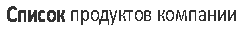
<style>
.page{position:relative;width:240px;height:30px;background:#ffffff}
.page>*{position:absolute;margin:0}
.t1{font:23.2px "Calibri";color:#323232;scale:0.81 1}
.t2{font:23.2px "Calibri";color:#323232;font-weight:bold;scale:0.81 1}
</style>
<div class="page">
<p class="t1" style="left:7px;top:6px;width:229px;height:19px"><span class="t2">Список</span> продуктов компании</p>
</div>
